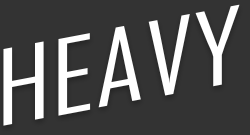
<style>
.page{position:relative;width:250px;height:135px;background:#333333}
.page>*{position:absolute;margin:0}
.t1{font:100px "AgencyFB-Reg";color:#ffffff;scale:1.26 1}
</style>
<div class="page">
<p class="t1" style="left:3px;top:4px;width:237px;height:122px;rotate:-11deg">HEAVY</p>
</div>
